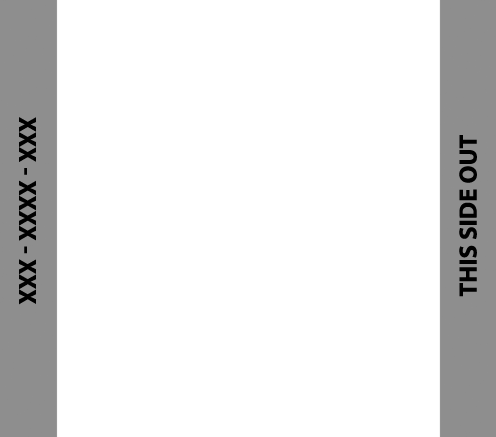
<style>
.page{position:relative;width:496px;height:437px;background:#ffffff}
.page>*{position:absolute;margin:0}
.t1{font:25px "MyriadPro-Bold";color:#000000}
</style>
<div class="page">
<p class="t1" style="left:19px;top:117px;width:17px;height:188px;rotate:90deg">XXX - XXXX - XXX</p>
<p class="t1" style="left:459px;top:135px;width:18px;height:162px;rotate:-90deg">THIS SIDE OUT</p>
</div>
